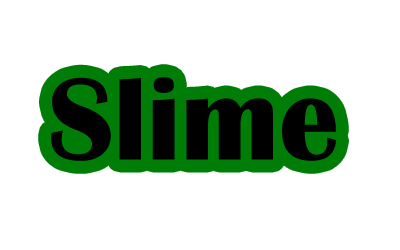
<style>
.page{position:relative;width:400px;height:250px;background:#ffffff}
.page>*{position:absolute;margin:0}
.t1{font:120px "BritannicBold";color:#000000}
</style>
<div class="page">
<p class="t1" style="left:51px;top:77px;width:285px;height:84px">Slime</p>
</div>
